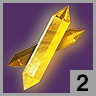
<style>
.page{position:relative;width:96px;height:96px}
.page>*{position:absolute;margin:0}
.t1{font:23.6px "NHaasGroteskDSPro-65Md";color:#000000}
</style>
<div class="page">
<p class="t1" style="left:76px;top:74px;width:12px;height:17px">2</p>
</div>
